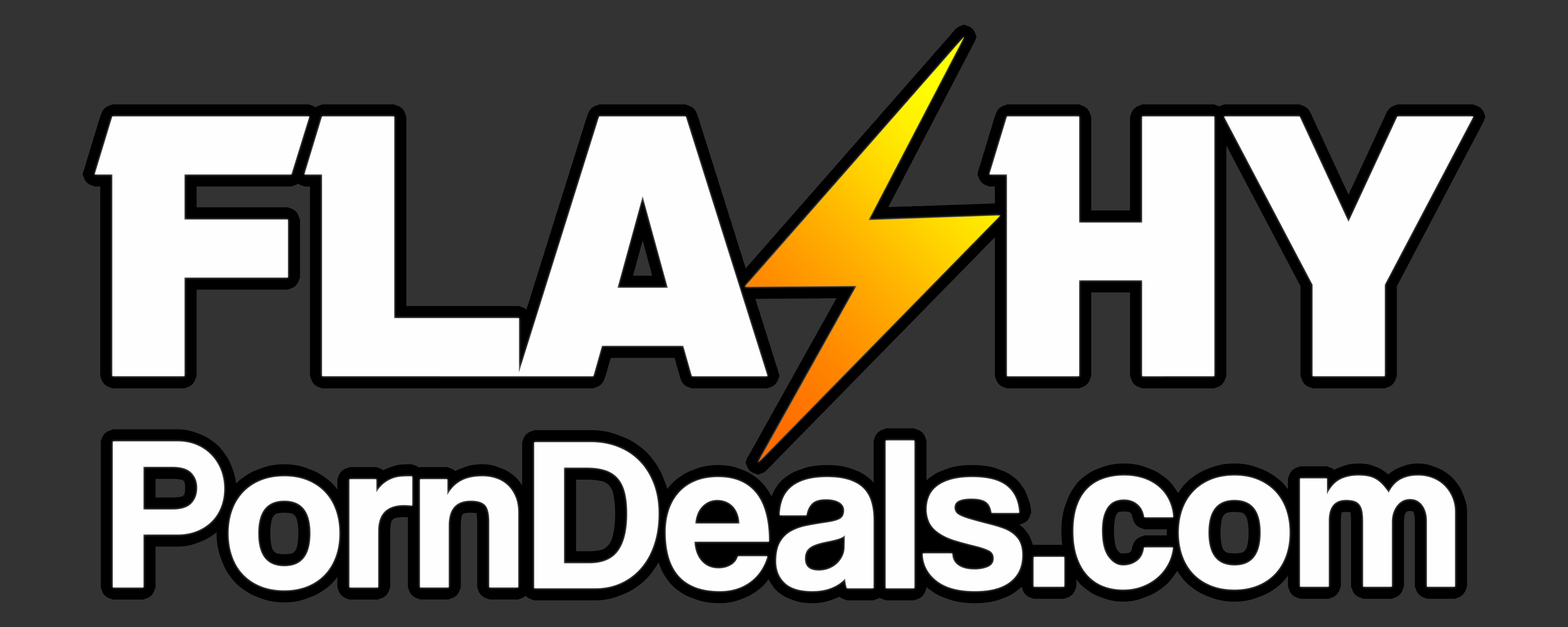
<style>
.page{position:relative;width:1568px;height:627px;background:#333333}
.page>*{position:absolute;margin:0}
.t1{font:220px "CoolveticaRg-Regular";color:#fefefe}
</style>
<div class="page">
<p class="t1" style="left:113px;top:441px;width:405px;height:150px">Porn</p>
<p class="t1" style="left:534px;top:441px;width:488px;height:151px">Deals</p>
<p class="t1" style="left:1033px;top:475px;width:422px;height:115px">.com</p>
</div>
